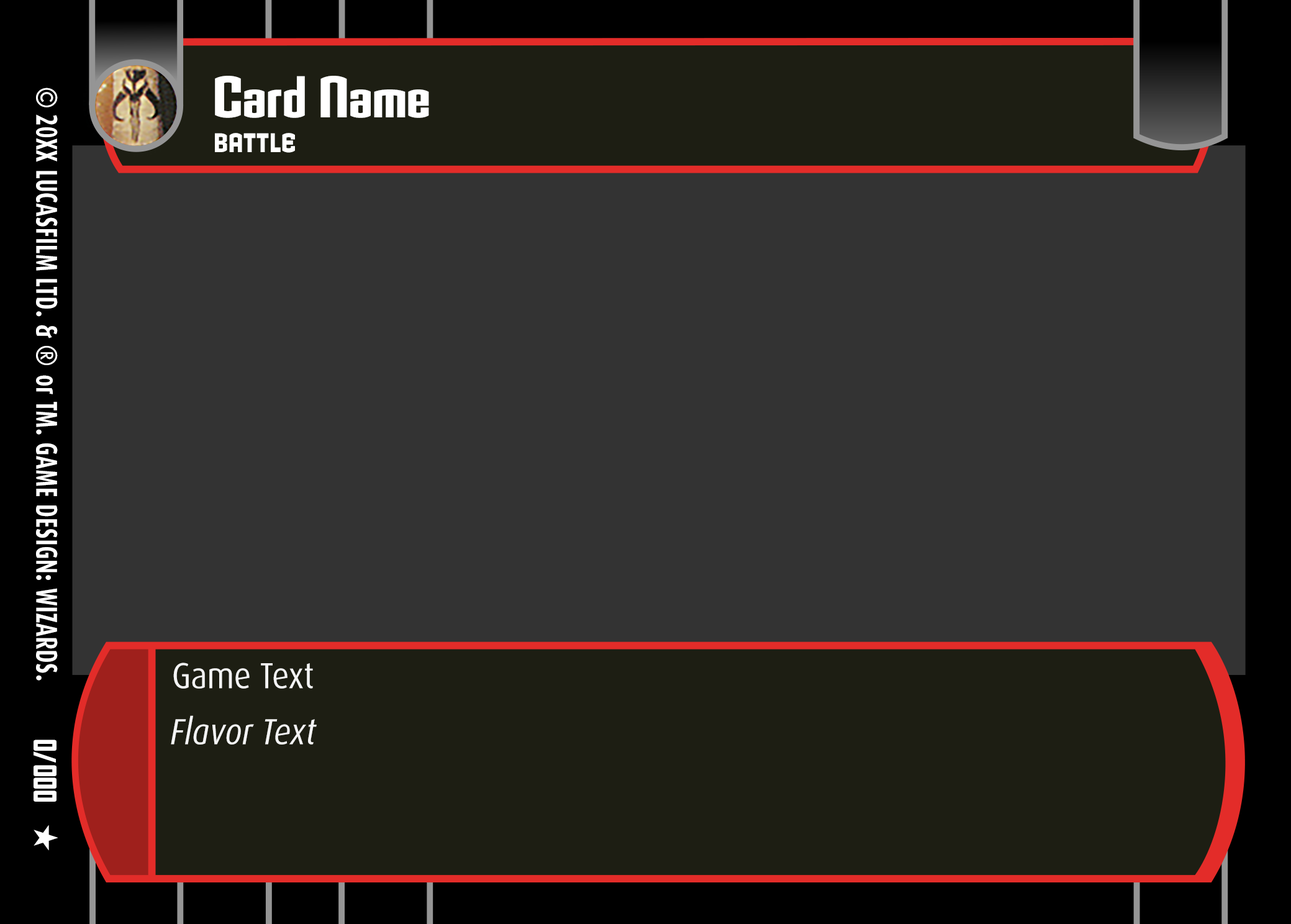
<style>
.page{position:relative;width:1291px;height:924px;background:#333333}
.page>*{position:absolute;margin:0}
.t1{font:57.1px "Armada-BoldCondensed";letter-spacing:0.002em;color:#ffffff}
.t2{font:30.1px "Dax-Bold";letter-spacing:0.02em;color:#ffffff;scale:0.71 1}
.t3{font:30.1px "Dax-Bold";color:#ffffff;scale:0.9 1}
.t4{font:30.1px "Dax-Bold";color:#ffffff;scale:0.71 1}
.t5{font:30.1px "Dax-Bold";letter-spacing:0.02em;color:#ffffff;scale:0.9 1}
.t6{font:30.1px "Dax-Bold";letter-spacing:0.032em;color:#ffffff;scale:0.71 1}
.t7{font:26.1px "Armada-Bold";letter-spacing:0.02em;color:#ffffff;text-transform:uppercase;scale:0.7 1}
.t8{font:36.2px "Dax-Regular";color:#f4f4f4;scale:0.89 1}
.t9{font:36.2px "Dax-Italic";color:#f4f4f4;scale:0.89 1}
.t10{font:29.5px "AgencyFBBlack";color:#ffffff;scale:0.82 1}
</style>
<div class="page">
<p class="t1" style="left:215px;top:76px;width:214px;height:42px">Card Name</p>
<p class="t2" style="left:36px;top:88px;width:22px;height:592px;rotate:90deg"><span class="t3">©</span><span class="t4"> 20XX </span>LUCASFILM LTD<span class="t5">.</span> &amp; <span class="t5">® </span>or TM<span class="t5">.</span> G<span class="t6">AME DES</span>IGN<span class="t5">:</span> WIZARDS<span class="t5">.</span></p>
<p class="t7" style="left:215px;top:133px;width:80px;height:20px">Battle</p>
<p class="t8" style="left:173px;top:662px;width:140px;height:27px">Game Text</p>
<p class="t9" style="left:171px;top:715px;width:146px;height:29px">Flavor Text</p>
<p class="t10" style="left:34px;top:739px;width:22px;height:63px;rotate:90deg">0/000</p>
</div>
